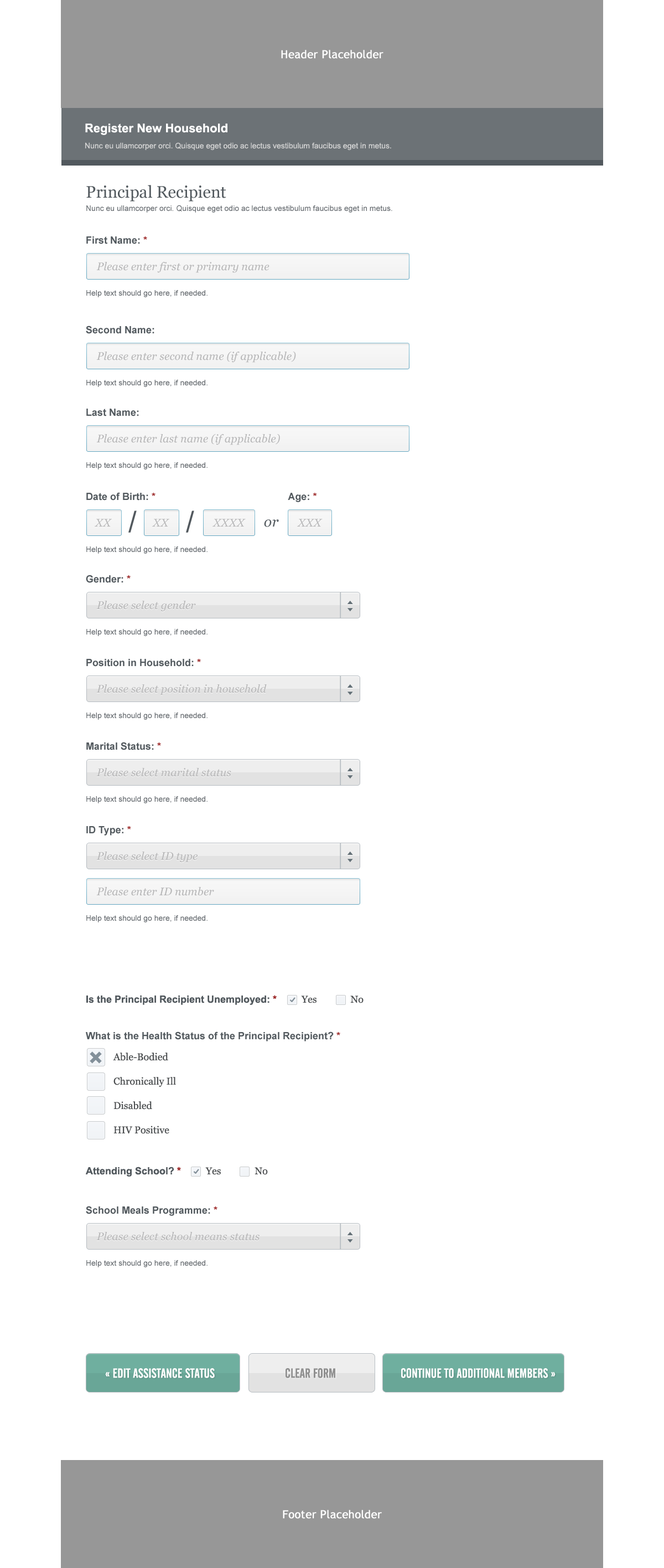
<style>
.page{position:relative;width:664px;height:1568px;background:#ffffff}
.page>*{position:absolute;margin:0}
.t1{font:11.1px "TrebuchetMS";color:#ffffff;font-weight:bold}
.t2{font:7.8px/16.1px "ArialMT";color:#d4d4d4}
.t3{font:12.2px/16.1px "Arial-BoldMT";color:#ffffff}
.t4{font:7.8px/13.3px "ArialMT";color:#61666b}
.t5{font:16.6px/8.9px "Georgia";color:#52595e}
.t6{font:7.8px/52px "ArialMT";color:#61666b}
.t7{font:10px/8.9px "Arial-BoldMT";color:#52595e}
.t8{font:10px/8.9px "Arial-BoldMT";color:#992222}
.t9{font:11.1px "Georgia-Italic";color:#b6b6b7}
.t10{font:29.2px "ArialMT";color:#52595e}
.t11{font:14.4px "Georgia-Italic";color:#52595e}
.t12{font:10px "Arial-BoldMT";color:#52595e}
.t13{font:10px "Arial-BoldMT";color:#992222}
.t14{font:10px "Georgia";color:#4b4e50}
.t15{font:10px/24.4px "Georgia";color:#4b4e50}
.t16{font:13.2px "AlternateGothicNo2BT-Regular";color:#ffffff}
.t17{font:13.2px "AlternateGothicNo2BT-Regular";color:#909090}
</style>
<div class="page">
<p class="t1" style="left:281px;top:50px;width:103px;height:9px">Header Placeholder</p>
<p class="t2" style="left:85px;top:123px;width:306px;height:27px"><span class="t3">Register New Household<br></span>Nunc eu ullamcorper orci. Quisque eget odio ac lectus vestibulum faucibus eget in metus.</p>
<p class="t4" style="left:86px;top:185px;width:307px;height:28px"><span class="t5">Principal Recipient<br></span>Nunc eu ullamcorper orci. Quisque eget odio ac lectus vestibulum faucibus eget in metus.</p>
<p class="t6" style="left:86px;top:236px;width:122px;height:61px"><span class="t7">First Name: </span><span class="t8">*<br></span>Help text should go here, if needed.</p>
<p class="t9" style="left:96px;top:262px;width:174px;height:11px">Please enter first or primary name</p>
<p class="t6" style="left:86px;top:326px;width:122px;height:61px"><span class="t7">Second Name:<br></span>Help text should go here, if needed.</p>
<p class="t9" style="left:96px;top:352px;width:200px;height:11px">Please enter second name (if applicable)</p>
<p class="t6" style="left:86px;top:409px;width:122px;height:61px"><span class="t7">Last Name:<br></span>Help text should go here, if needed.</p>
<p class="t9" style="left:96px;top:434px;width:184px;height:11px">Please enter last name (if applicable)</p>
<p class="t6" style="left:86px;top:492px;width:231px;height:62px"><span class="t7">Date of Birth: </span><span class="t8">*                                                </span><span class="t7">Age: </span><span class="t8">*  <br></span>Help text should go here, if needed.</p>
<p class="t9" style="left:95px;top:519px;width:17px;height:8px">XX</p>
<p class="t10" style="left:128px;top:510px;width:9px;height:23px">/</p>
<p class="t9" style="left:152px;top:519px;width:17px;height:8px">XX</p>
<p class="t10" style="left:186px;top:510px;width:8px;height:23px">/</p>
<p class="t9" style="left:213px;top:519px;width:33px;height:8px">XXXX</p>
<p class="t11" style="left:264px;top:519px;width:15px;height:8px">or</p>
<p class="t9" style="left:297px;top:519px;width:26px;height:8px">XXX</p>
<p class="t6" style="left:86px;top:575px;width:122px;height:61px"><span class="t7">Gender: </span><span class="t8">*<br></span>Help text should go here, if needed.</p>
<p class="t9" style="left:96px;top:601px;width:100px;height:11px">Please select gender</p>
<p class="t6" style="left:86px;top:659px;width:122px;height:61px"><span class="t7">Position in Household: </span><span class="t8">*<br></span>Help text should go here, if needed.</p>
<p class="t9" style="left:96px;top:684px;width:171px;height:11px">Please select position in household</p>
<p class="t6" style="left:86px;top:742px;width:122px;height:61px"><span class="t7">Marital Status: </span><span class="t8">*<br></span>Help text should go here, if needed.</p>
<p class="t9" style="left:96px;top:768px;width:135px;height:9px">Please select marital status</p>
<p class="t6" style="left:86px;top:826px;width:122px;height:96px"><span class="t7">ID Type: </span><span class="t8">*<br><br><br><br><br></span>Help text should go here, if needed.</p>
<p class="t9" style="left:96px;top:852px;width:102px;height:11px">Please select ID type</p>
<p class="t9" style="left:96px;top:887px;width:118px;height:9px">Please enter ID number</p>
<p class="t12" style="left:86px;top:995px;width:278px;height:10px">Is the Principal Recipient Unemployed: <span class="t13">*         </span><span class="t14">Yes              No</span></p>
<p class="t12" style="left:86px;top:1031px;width:255px;height:10px">What is the Health Status of the Principal Recipient? <span class="t13">*</span></p>
<p class="t15" style="left:113px;top:1053px;width:63px;height:81px">Able-Bodied<br>Chronically Ill<br>Disabled<br>HIV Positive</p>
<p class="t14" style="left:86px;top:1167px;width:182px;height:10px"><span class="t12">Attending School? </span><span class="t13">*         </span>Yes              No</p>
<p class="t6" style="left:86px;top:1206px;width:132px;height:61px"><span class="t7">School Meals Programme: </span><span class="t8">*<br></span>Help text should go here, if needed.</p>
<p class="t9" style="left:96px;top:1232px;width:164px;height:9px">Please select school means status</p>
<p class="t16" style="left:105px;top:1368px;width:110px;height:10px">« EDIT ASSISTANCE STATUS</p>
<p class="t17" style="left:286px;top:1368px;width:50px;height:10px">CLEAR FORM</p>
<p class="t16" style="left:401px;top:1368px;width:155px;height:10px">CONTINUE TO ADDITIONAL MEMBERS »</p>
<p class="t1" style="left:283px;top:1510px;width:99px;height:9px">Footer Placeholder</p>
</div>
